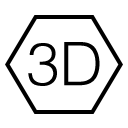
<style>
.page{position:relative;width:128px;height:128px;background:#ffffff}
.page>*{position:absolute;margin:0}
.t1{font:60px "Helvetica-Light";color:#000000}
</style>
<div class="page">
<p class="t1" style="left:28px;top:42px;width:72px;height:44px">3D</p>
</div>
